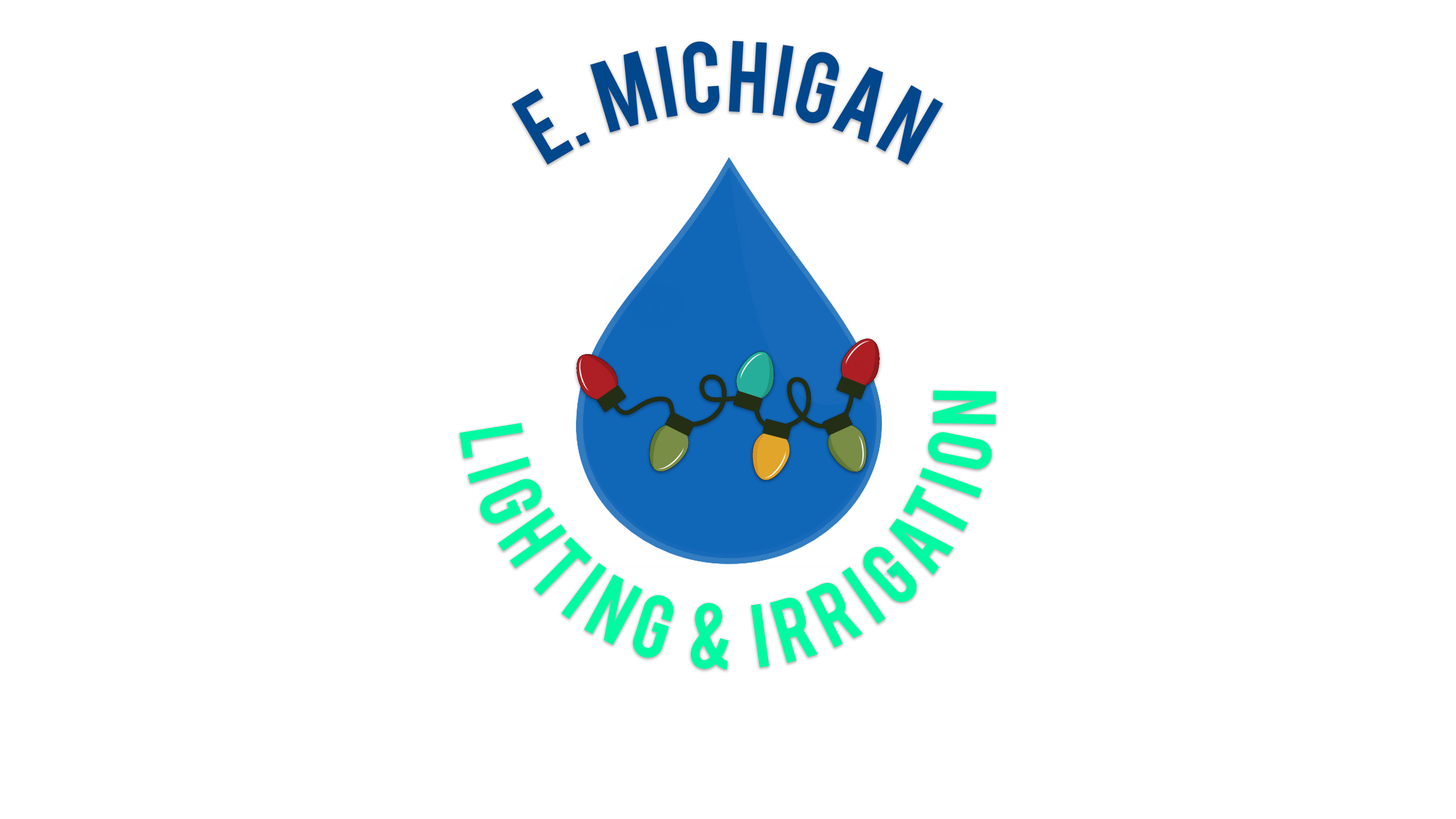
<style>
.page{position:relative;width:1456px;height:819px;background:#ffffff}
.page>*{position:absolute;margin:0}
.t1{font:79.2px "Bebas";color:#00478c}
.t2{font:70.4px "Bebas";letter-spacing:0.14em;color:#00faa2}
</style>
<div class="page">
<p class="t1" style="left:511px;top:41px;width:432px;height:124px">E.  Michigan</p>
<p class="t2" style="left:459px;top:390px;width:537px;height:280px;text-align:center">LIGHTING &amp; IRRIGATION</p>
</div>
